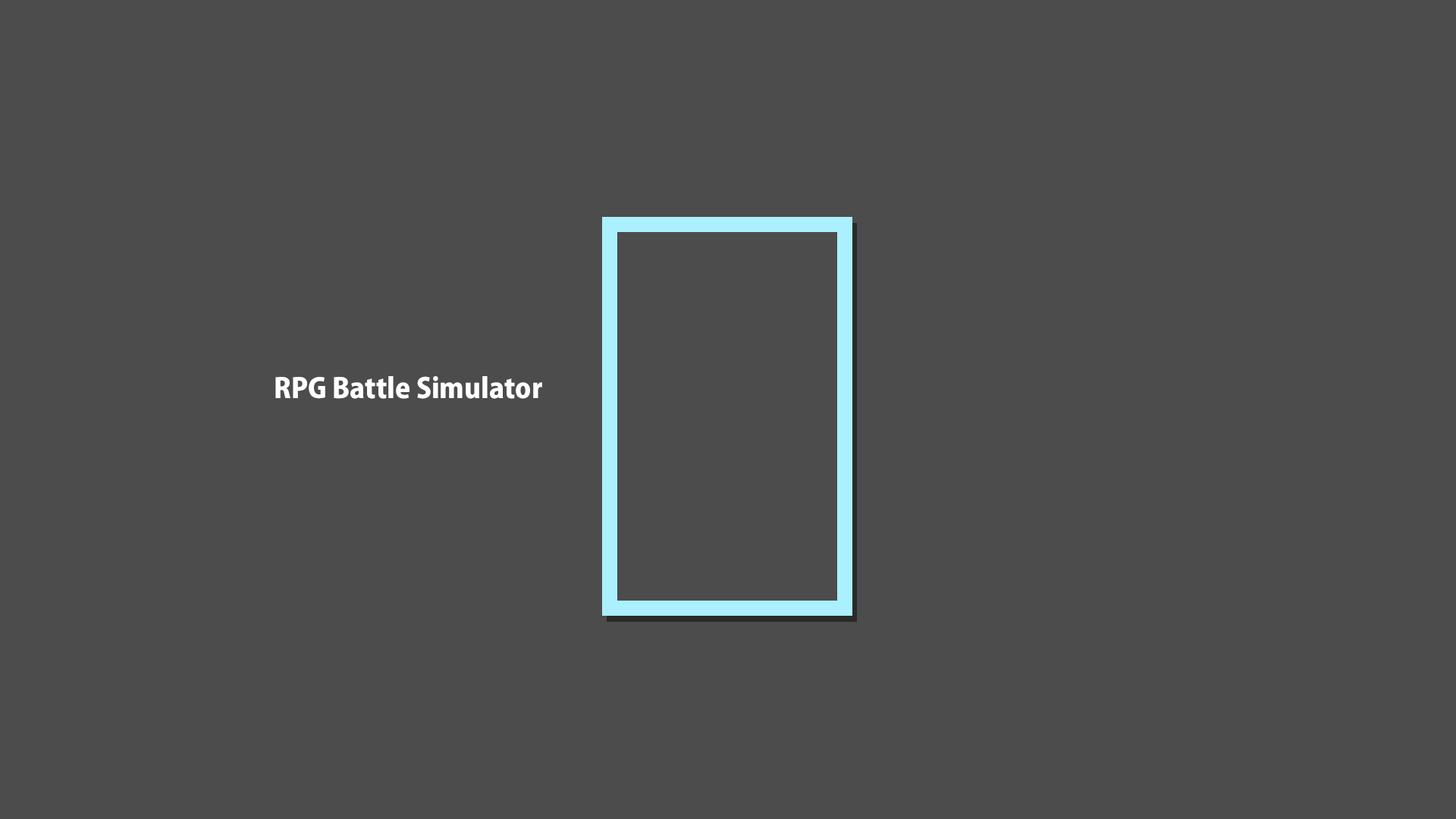
<style>
.page{position:relative;width:1456px;height:819px;background:#4c4c4c}
.page>*{position:absolute;margin:0}
.t1{font:27.3px "KozGoPr6N-Heavy";color:#ffffff}
</style>
<div class="page">
<p class="t1" style="left:275px;top:376px;width:267px;height:23px">RPG Battle Simulator</p>
</div>
